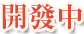
<style>
.page{position:relative;width:84px;height:34px;background:#fff6f2}
.page>*{position:absolute;margin:0}
.t1{font:28px "RyuminPr6N-ExBold";color:#da4e37}
</style>
<div class="page">
<p class="t1" style="left:2px;top:3px;width:80px;height:27px">開發中</p>
</div>
